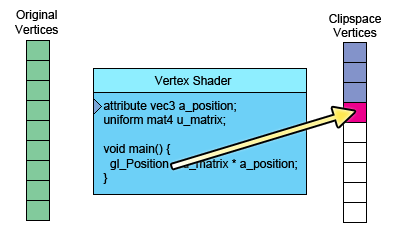
<style>
.page{position:relative;width:405px;height:245px;background:#ffffff}
.page>*{position:absolute;margin:0}
.t1{font:12px "ArialMT";color:#000000}
</style>
<div class="page">
<p class="t1" style="left:15px;top:10px;width:43px;height:24px;text-align:center">Original<br>Vertices</p>
<p class="t1" style="left:329px;top:14px;width:52px;height:23px;text-align:center">Clipspace<br>Vertices</p>
<p class="t1" style="left:154px;top:76px;width:78px;height:9px">Vertex Shader</p>
<p class="t1" style="left:103px;top:101px;width:194px;height:83px">attribute vec3 a_position;<br>uniform mat4 u_matrix;<br><br>void main() {<br>  gl_Position = u_matrix * a_position;<br>}</p>
</div>
